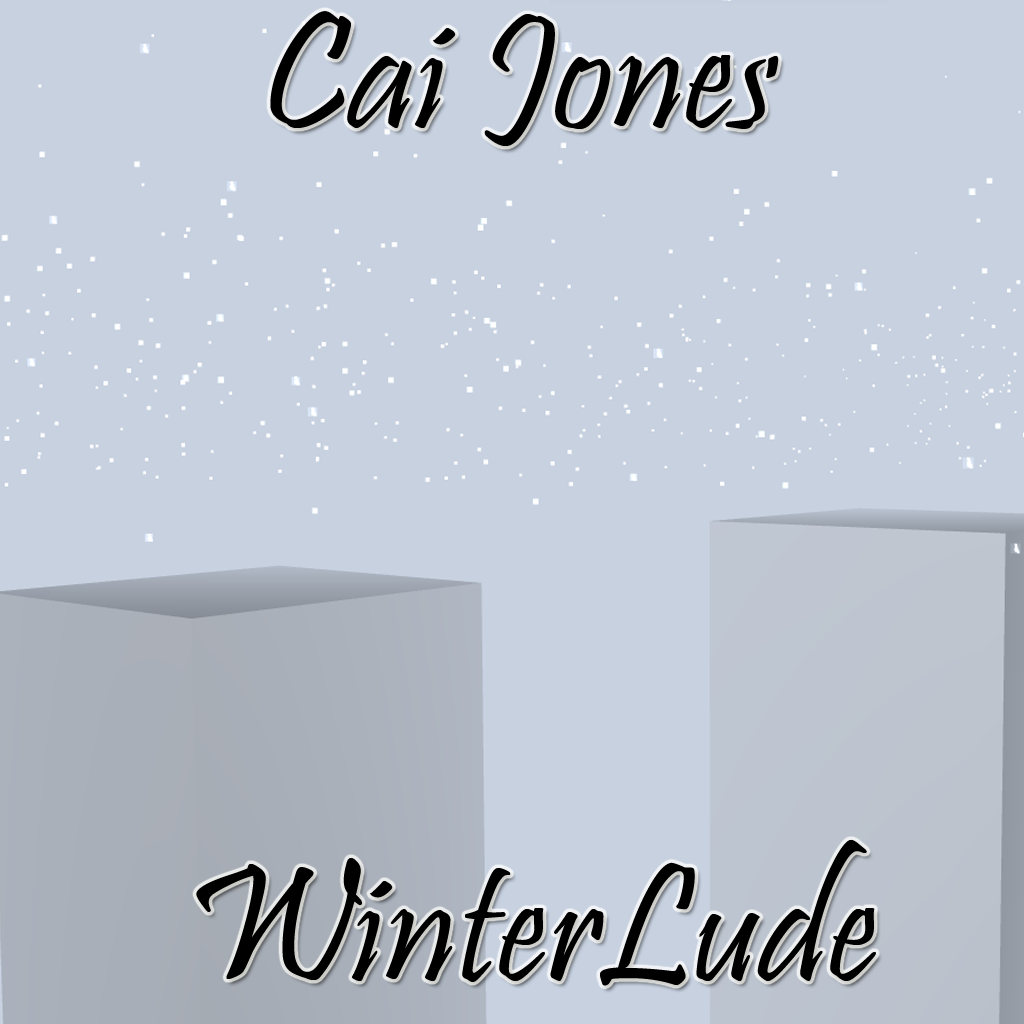
<style>
.page{position:relative;width:1024px;height:1024px;background:#c7d1e0}
.page>*{position:absolute;margin:0}
.t1{font:171px "Pristina-Regular";color:#000000}
</style>
<div class="page">
<p class="t1" style="left:270px;top:11px;width:509px;height:135px">Cai Jones</p>
<p class="t1" style="left:196px;top:839px;width:680px;height:147px">WinterLude</p>
</div>
